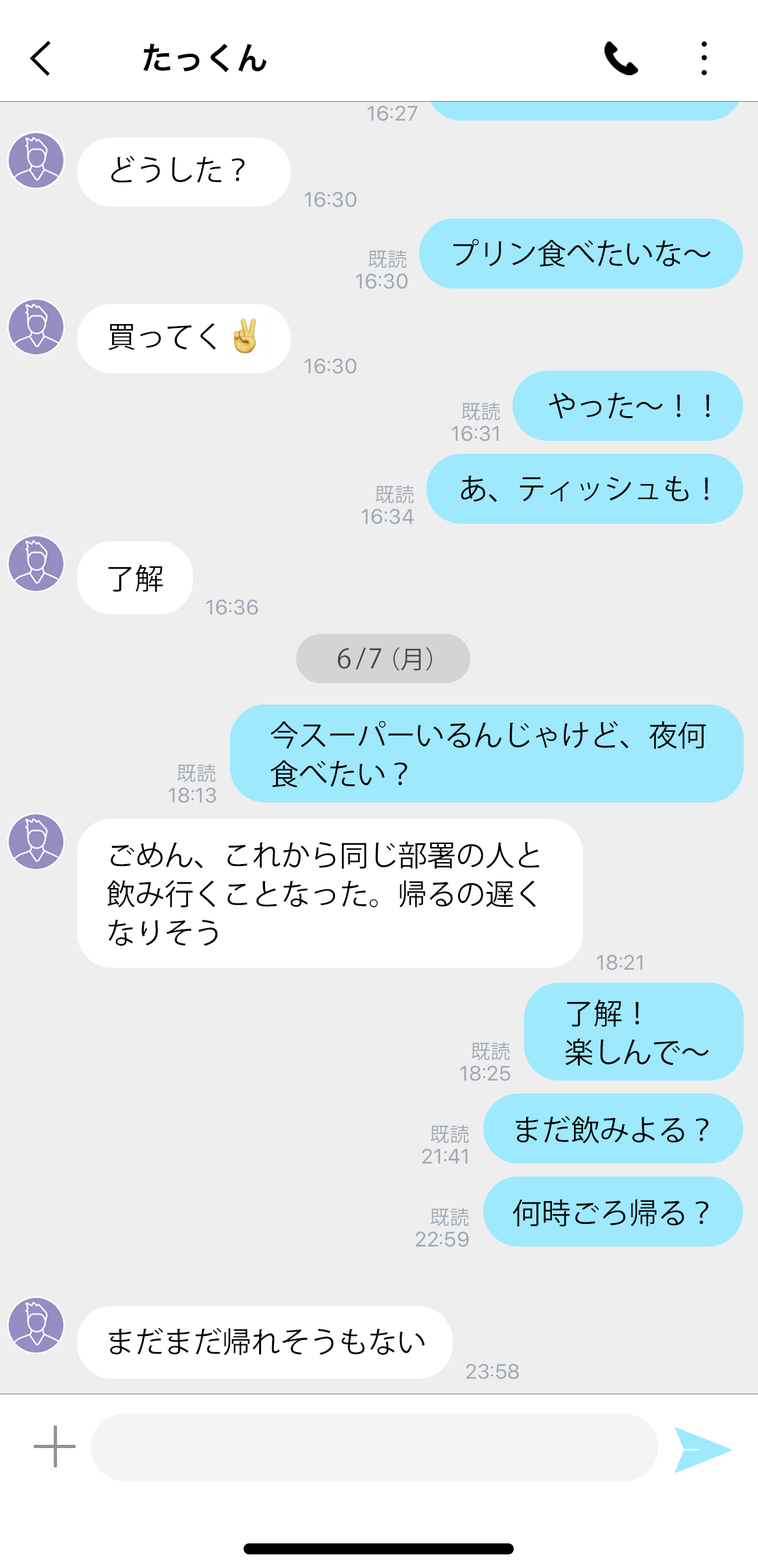
<style>
.page{position:relative;width:758px;height:1568px;background:#eeeeee}
.page>*{position:absolute;margin:0}
.t1{font:31.8px "HiraginoSans-W6";color:#000000}
.t2{font:20.7px "SFPro-Regular";letter-spacing:0.025em;color:#9da7b4}
.t3{font:29.2px "KozGoPr6N-Regular";color:#000000}
.t4{font:19.4px "KozGoPr6N-Regular";letter-spacing:0.025em;color:#9da7b4}
.t5{font:26.6px "KozGoPr6N-Regular";color:#454545}
.t6{font:24.6px "KozGoPr6N-Regular";color:#454545}
.t7{font:29.2px/38.9px "KozGoPr6N-Regular";color:#000000}
</style>
<div class="page">
<p class="t1" style="left:143px;top:43px;width:124px;height:30px">たっくん</p>
<p class="t2" style="left:368px;top:106px;width:49px;height:15px">16:27</p>
<p class="t3" style="left:111px;top:156px;width:134px;height:27px">どうした？</p>
<p class="t2" style="left:305px;top:192px;width:52px;height:15px">16:30</p>
<p class="t3" style="left:453px;top:239px;width:258px;height:28px">プリン食べたいな〜</p>
<p class="t4" style="left:368px;top:250px;width:39px;height:18px">既読</p>
<p class="t2" style="left:356px;top:274px;width:52px;height:15px">16:30</p>
<p class="t3" style="left:108px;top:323px;width:108px;height:27px">買ってく</p>
<p class="t2" style="left:305px;top:358px;width:52px;height:16px">16:30</p>
<p class="t4" style="left:462px;top:402px;width:38px;height:19px">既読</p>
<p class="t3" style="left:549px;top:392px;width:161px;height:27px">やった〜！！</p>
<p class="t2" style="left:452px;top:426px;width:47px;height:15px">16:31</p>
<p class="t4" style="left:375px;top:485px;width:39px;height:19px">既読</p>
<p class="t3" style="left:461px;top:475px;width:248px;height:27px">あ、ティッシュも！</p>
<p class="t2" style="left:362px;top:509px;width:52px;height:15px">16:34</p>
<p class="t3" style="left:108px;top:565px;width:55px;height:27px">了解</p>
<p class="t2" style="left:206px;top:600px;width:52px;height:15px">16:36</p>
<p class="t5" style="left:338px;top:648px;width:94px;height:23px">6/7<span class="t6">（月）</span></p>
<p class="t7" style="left:270px;top:721px;width:437px;height:67px">今スーパーいるんじゃけど、夜何<br>食べたい？</p>
<p class="t4" style="left:177px;top:764px;width:39px;height:18px">既読</p>
<p class="t2" style="left:169px;top:788px;width:47px;height:15px">18:13</p>
<p class="t7" style="left:107px;top:841px;width:433px;height:105px">ごめん、これから同じ部署の人と<br>飲み行くことなった。帰るの遅く<br>なりそう</p>
<p class="t2" style="left:597px;top:955px;width:46px;height:15px">18:21</p>
<p class="t7" style="left:565px;top:1000px;width:144px;height:66px">了解！<br>楽しんで〜</p>
<p class="t4" style="left:471px;top:1042px;width:39px;height:18px">既読</p>
<p class="t2" style="left:460px;top:1066px;width:51px;height:15px">18:25</p>
<p class="t3" style="left:516px;top:1116px;width:193px;height:27px">まだ飲みよる？</p>
<p class="t4" style="left:430px;top:1125px;width:39px;height:18px">既読</p>
<p class="t2" style="left:422px;top:1149px;width:46px;height:15px">21:41</p>
<p class="t3" style="left:513px;top:1199px;width:196px;height:27px">何時ごろ帰る？</p>
<p class="t4" style="left:430px;top:1208px;width:39px;height:18px">既読</p>
<p class="t2" style="left:415px;top:1232px;width:54px;height:15px">22:59</p>
<p class="t3" style="left:109px;top:1328px;width:316px;height:27px">まだまだ帰れそうもない</p>
<p class="t2" style="left:466px;top:1364px;width:53px;height:15px">23:58</p>
</div>
